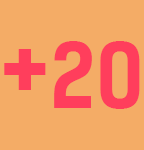
<style>
.page{position:relative;width:144px;height:150px;background:#f4ac66}
.page>*{position:absolute;margin:0}
.t1{font:85px "KelsonSans-Bold";letter-spacing:0.01em;color:#ff3e5c}
.t2{font:100px "KelsonSans-Bold";letter-spacing:0.01em;color:#ff3e5c}
</style>
<div class="page">
<p class="t1" style="left:4px;top:41px;width:136px;height:68px"><span class="t2">+</span>20</p>
</div>
